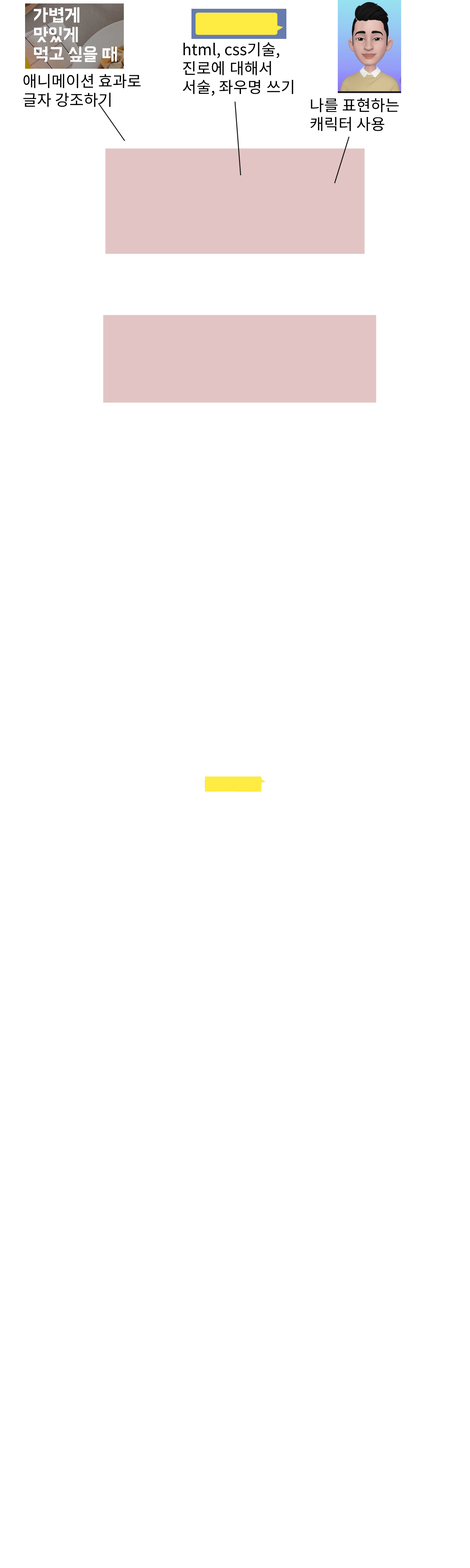
<style>
.page{position:relative;width:470px;height:1568px;background:#ffffff}
.page>*{position:absolute;margin:0}
.t1{font:15.7px "NotoSansKR-Regular";color:#000000}
</style>
<div class="page">
<p class="t1" style="left:183px;top:42px;width:111px;height:54px">html, css기술, 진로에 대해서 서술, 좌우명 쓰기</p>
<p class="t1" style="left:23px;top:74px;width:118px;height:33px">애니메이션 효과로 글자 강조하기</p>
<p class="t1" style="left:311px;top:98px;width:88px;height:33px">나를 표현하는 캐릭터 사용</p>
</div>
